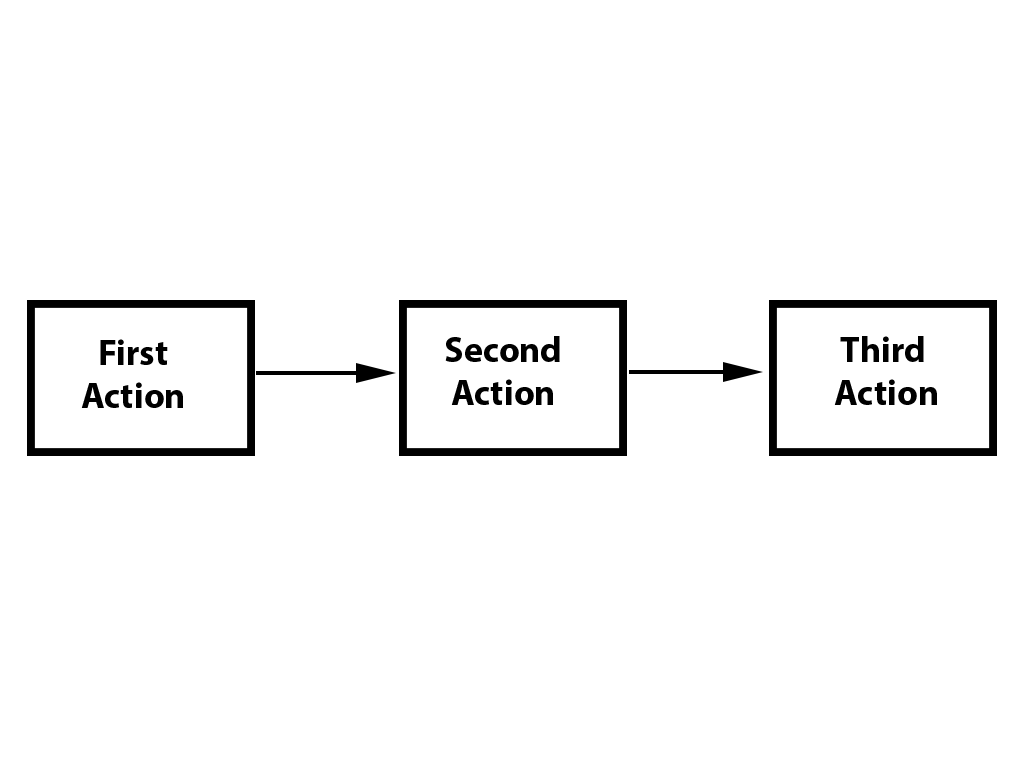
<style>
.page{position:relative;width:1024px;height:768px;background:#ffffff}
.page>*{position:absolute;margin:0}
.t1{font:36px "MyriadPro-Bold";color:#000000}
</style>
<div class="page">
<p class="t1" style="left:81px;top:339px;width:102px;height:69px;text-align:center">First <br>Action</p>
<p class="t1" style="left:445px;top:336px;width:115px;height:69px;text-align:center">Second Action</p>
<p class="t1" style="left:834px;top:336px;width:103px;height:69px;text-align:center">Third<br> Action</p>
</div>
